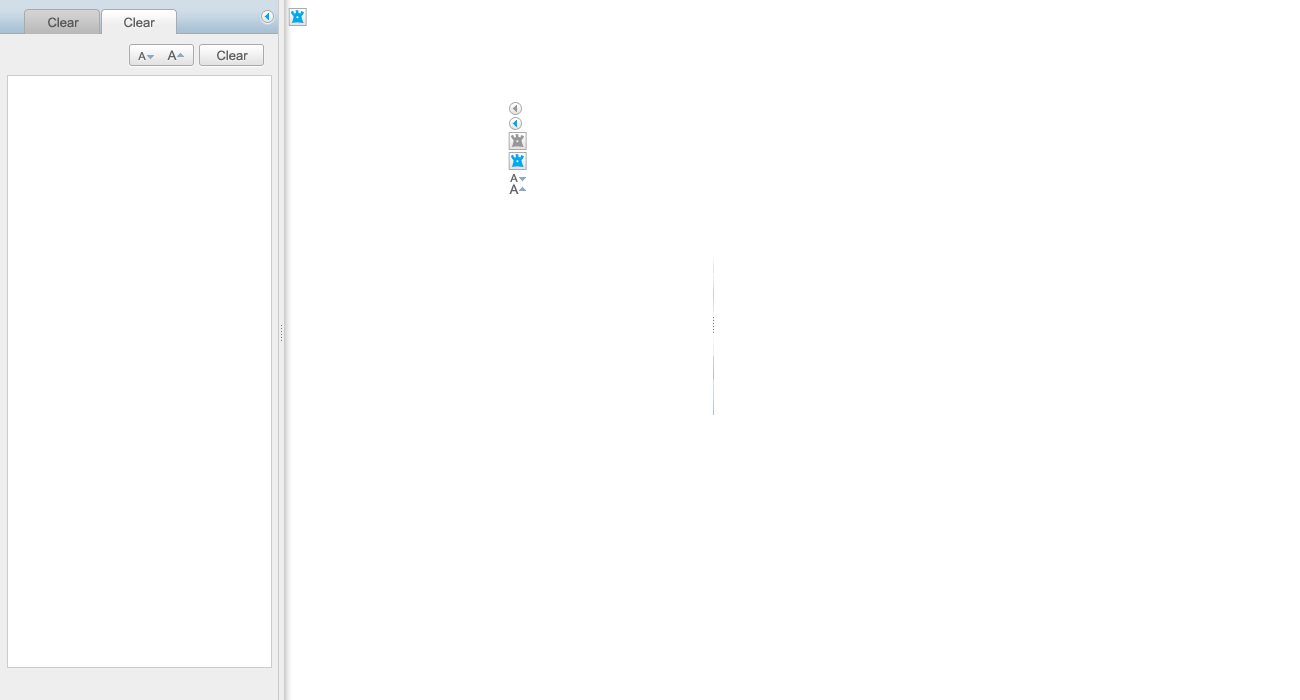
<style>
.page{position:relative;width:1300px;height:700px;background:#ffffff}
.page>*{position:absolute;margin:0}
.t1{font:11px "ArialMT";color:#636363}
.t2{font:13px "ArialMT";color:#636363}
</style>
<div class="page">
<p class="t1" style="left:138px;top:52px;width:8px;height:8px">A</p>
<p class="t2" style="left:167px;top:50px;width:10px;height:10px">A</p>
<p class="t2" style="left:217px;top:50px;width:31px;height:11px">Clear</p>
</div>
